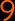
<style>
.page{position:relative;width:15px;height:21px;background:#000000}
.page>*{position:absolute;margin:0}
.t1{font:30px "Quicksand-Regular";color:#ff6600}
</style>
<div class="page">
<p class="t1" style="left:0px;top:0px;width:15px;height:21px">9</p>
</div>
